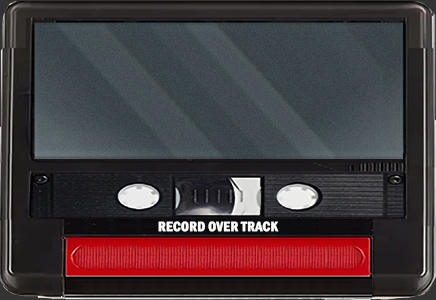
<style>
.page{position:relative;width:436px;height:300px}
.page>*{position:absolute;margin:0}
.t1{font:14px "FranklinGothic-DemiCond";color:#ffffff;font-weight:bold}
</style>
<div class="page">
<p class="t1" style="left:158px;top:221px;width:121px;height:11px">RECORD OVER TRACK</p>
</div>
